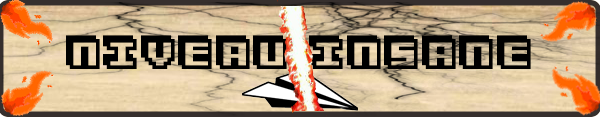
<style>
.page{position:relative;width:600px;height:117px}
.page>*{position:absolute;margin:0}
.t1{font:60px "3Dventure";color:#000000}
</style>
<div class="page">
<p class="t1" style="left:66px;top:35px;width:465px;height:34px">NIVEAU INSANE</p>
</div>
